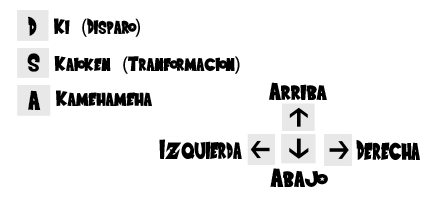
<style>
.page{position:relative;width:430px;height:200px;background:#ffffff}
.page>*{position:absolute;margin:0}
.t1{font:27.6px "SaiyanSans";color:#000000}
.t2{font:22.1px "SaiyanSans";color:#000000}
.t3{font:22.1px "MyriadPro-Regular";color:#000000}
.t4{font:26.6px "SaiyanSans";color:#000000;scale:1.07 1}
.t5{font:21.3px "SaiyanSans";color:#000000;scale:1.07 1}
.t6{font:21.3px "MyriadPro-Regular";color:#000000;scale:1.07 1}
.t7{font:24.6px "SaiyanSans";color:#000000;scale:1.18 1}
.t8{font:27.5px "SaiyanSans";color:#000000;scale:1.07 1}
.t9{font:22px "SaiyanSans";color:#000000;scale:1.07 1}
.t10{font:27.7px "SaiyanSans";color:#000000;scale:0.88 1}
.t11{font:28.6px "SaiyanSans";color:#000000;scale:0.87 1}
.t12{font:26.3px "SaiyanSans";color:#000000;scale:1.17 1}
</style>
<div class="page">
<p class="t1" style="left:28px;top:16px;width:9px;height:20px">D</p>
<p class="t2" style="left:54px;top:18px;width:86px;height:19px">Ki <span class="t3">(</span>Disparo<span class="t3">)</span></p>
<p class="t4" style="left:27px;top:53px;width:13px;height:19px">S</p>
<p class="t5" style="left:54px;top:56px;width:186px;height:18px">Kaioken <span class="t6">(</span>Tranformacion<span class="t6">)</span></p>
<p class="t7" style="left:269px;top:82px;width:58px;height:18px">Arriba</p>
<p class="t8" style="left:28px;top:90px;width:13px;height:20px">A</p>
<p class="t9" style="left:56px;top:90px;width:96px;height:16px">Kamehameha</p>
<p class="t10" style="left:159px;top:139px;width:83px;height:20px">Izquierda</p>
<p class="t11" style="left:356px;top:140px;width:64px;height:20px">Derecha</p>
<p class="t12" style="left:270px;top:168px;width:58px;height:19px">Abajo</p>
</div>
